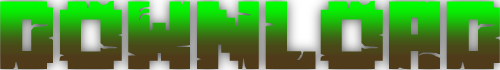
<style>
.page{position:relative;width:500px;height:70px}
.page>*{position:absolute;margin:0}
.t1{font:86.2px "MinecrafterAlt"}
</style>
<div class="page">
<p class="t1" style="left:0px;top:0px;width:500px;height:70px">DOWNLOAD</p>
</div>
